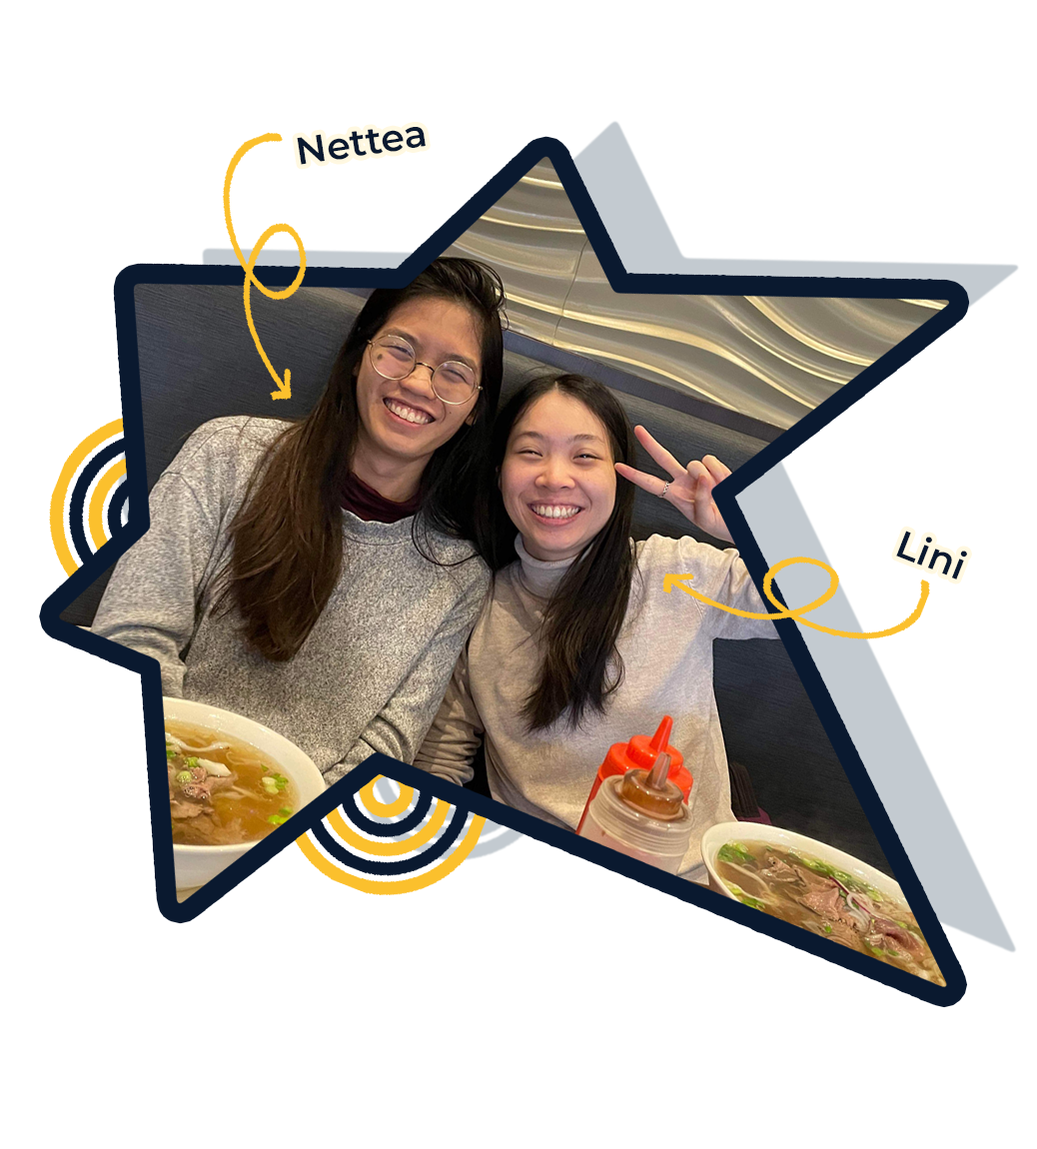
<style>
.page{position:relative;width:1037px;height:1149px;background:#ffffff}
.page>*{position:absolute;margin:0}
.t1{font:38px "Montserrat-SemiBold";color:#0a192f}
</style>
<div class="page">
<p class="t1" style="left:297px;top:127px;width:129px;height:38px;rotate:-9deg">Nettea</p>
<p class="t1" style="left:897px;top:531px;width:70px;height:49px;rotate:21deg">Lini</p>
</div>
